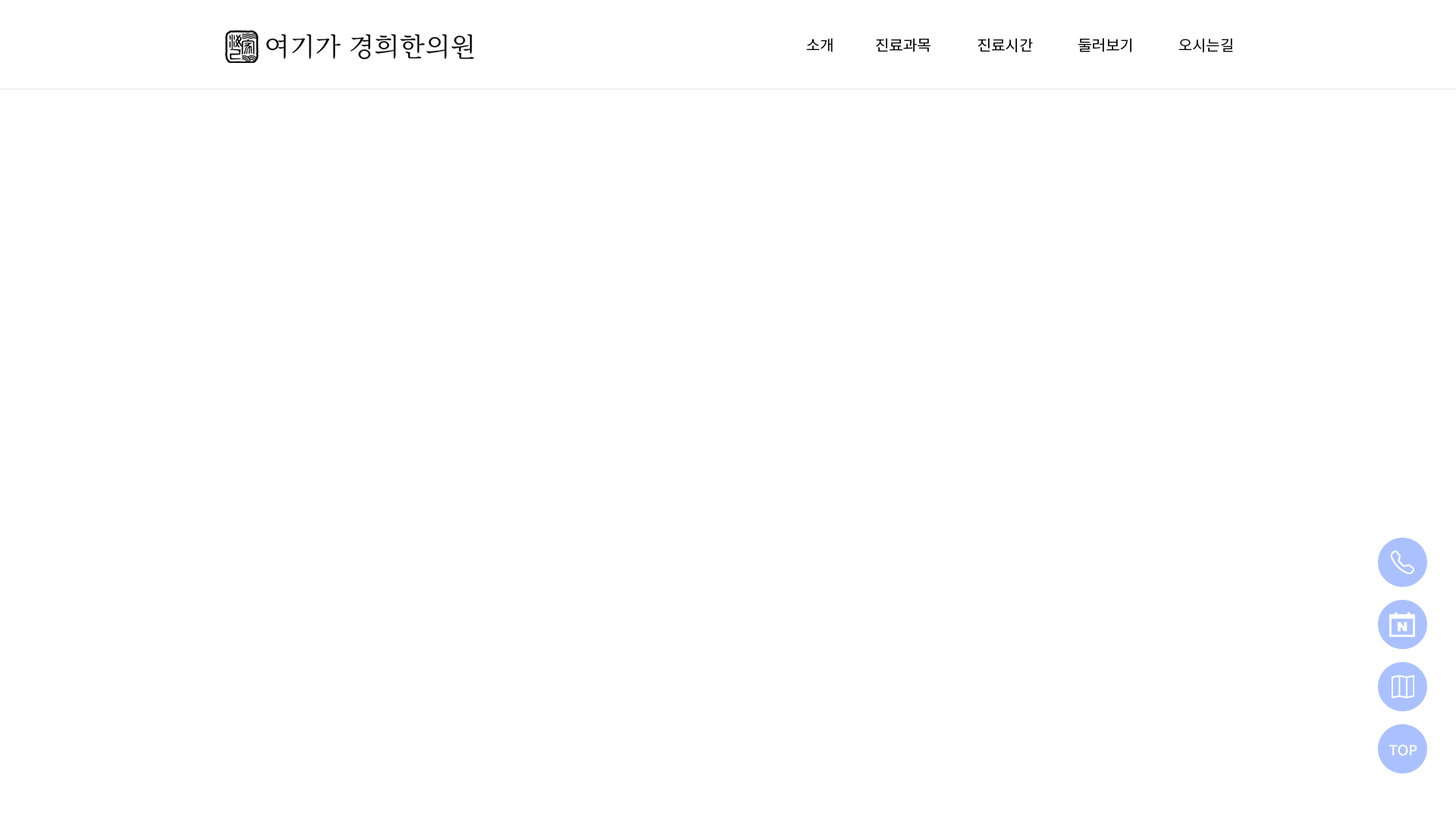
<style>
.page{position:relative;width:1456px;height:819px;background:#ffffff}
.page>*{position:absolute;margin:0}
.t1{font:15.2px "NotoSansKR-Regular";color:#000000}
.t2{font:14.4px "NotoSans-Medium";color:#ffffff}
</style>
<div class="page">
<p class="t1" style="left:806px;top:38px;width:27px;height:14px">소개</p>
<p class="t1" style="left:876px;top:38px;width:54px;height:14px">진료과목</p>
<p class="t1" style="left:977px;top:38px;width:56px;height:14px">진료시간</p>
<p class="t1" style="left:1078px;top:38px;width:53px;height:14px">둘러보기</p>
<p class="t1" style="left:1178px;top:38px;width:55px;height:14px">오시는길</p>
<p class="t2" style="left:1389px;top:745px;width:28px;height:11px">TOP</p>
</div>
